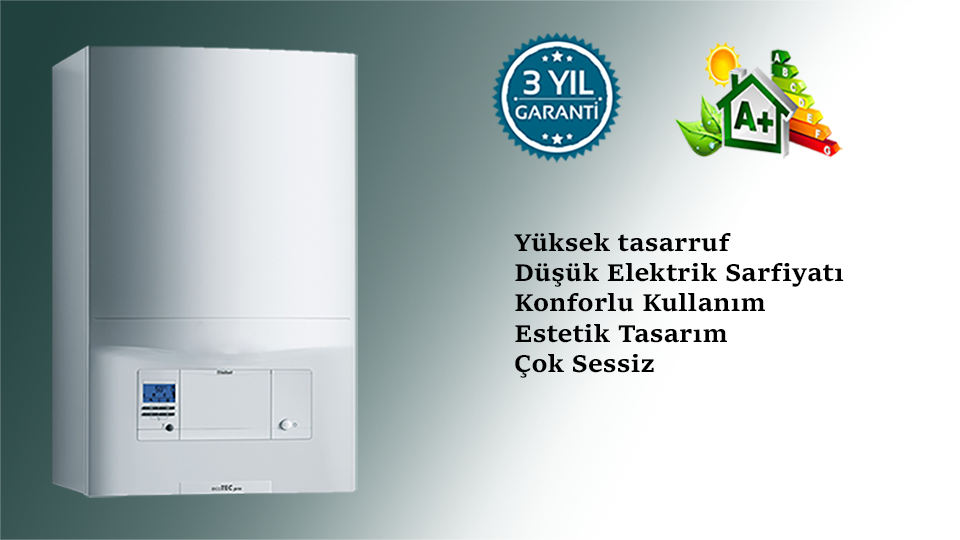
<style>
.page{position:relative;width:960px;height:540px;background:#ffffff}
.page>*{position:absolute;margin:0}
.t1{font:25.3px "SitkaSmall-Bold";color:#000000}
</style>
<div class="page">
<p class="t1" style="left:514px;top:233px;width:330px;height:145px">Yüksek tasarruf<br>Düşük Elektrik Sarfiyatı<br>Konforlu Kullanım<br>Estetik Tasarım<br>Çok Sessiz</p>
</div>
